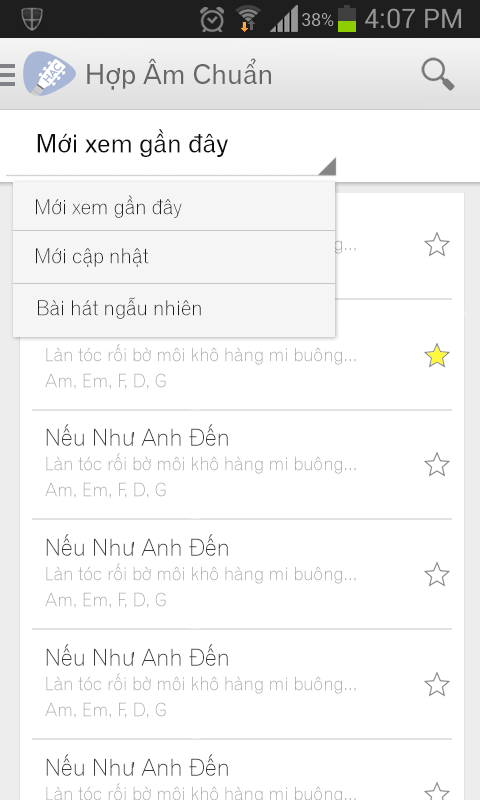
<style>
.page{position:relative;width:480px;height:800px;background:#ffffff}
.page>*{position:absolute;margin:0}
.t1{font:27px "UVNGioMay";color:#666666}
.t2{font:25px "UVNGioMay";color:#0e0e0e}
.t3{font:20px "UVNGioMayNhe";color:#1e1e1e}
.t4{font:18px "UVNGioMayNhe";color:#a5a5a5}
.t5{font:23px "UVNGioMayNhe";color:#3a3a3a}
</style>
<div class="page">
<p class="t1" style="left:87px;top:58px;width:184px;height:32px">Hợp Âm Chuẩn</p>
<p class="t2" style="left:37px;top:129px;width:191px;height:28px">Mới xem gần đây</p>
<p class="t3" style="left:36px;top:195px;width:146px;height:23px">Mới xem gần đây</p>
<p class="t3" style="left:36px;top:248px;width:113px;height:19px">Mới cập nhật</p>
<p class="t3" style="left:38px;top:297px;width:163px;height:22px">Bài hát ngẫu nhiên</p>
<p class="t4" style="left:46px;top:344px;width:310px;height:21px">Làn tóc rối bờ môi khô hàng mi buông...</p>
<p class="t4" style="left:45px;top:373px;width:121px;height:17px">Am, Em, F, D, G</p>
<p class="t5" style="left:46px;top:424px;width:182px;height:22px">Nếu Như Anh Đến</p>
<p class="t4" style="left:46px;top:453px;width:310px;height:21px">Làn tóc rối bờ môi khô hàng mi buông...</p>
<p class="t4" style="left:45px;top:482px;width:121px;height:17px">Am, Em, F, D, G</p>
<p class="t5" style="left:46px;top:534px;width:182px;height:22px">Nếu Như Anh Đến</p>
<p class="t4" style="left:46px;top:563px;width:310px;height:21px">Làn tóc rối bờ môi khô hàng mi buông...</p>
<p class="t4" style="left:45px;top:592px;width:121px;height:17px">Am, Em, F, D, G</p>
<p class="t5" style="left:46px;top:644px;width:182px;height:22px">Nếu Như Anh Đến</p>
<p class="t4" style="left:46px;top:673px;width:310px;height:21px">Làn tóc rối bờ môi khô hàng mi buông...</p>
<p class="t4" style="left:45px;top:702px;width:121px;height:17px">Am, Em, F, D, G</p>
<p class="t5" style="left:46px;top:754px;width:182px;height:22px">Nếu Như Anh Đến</p>
</div>
